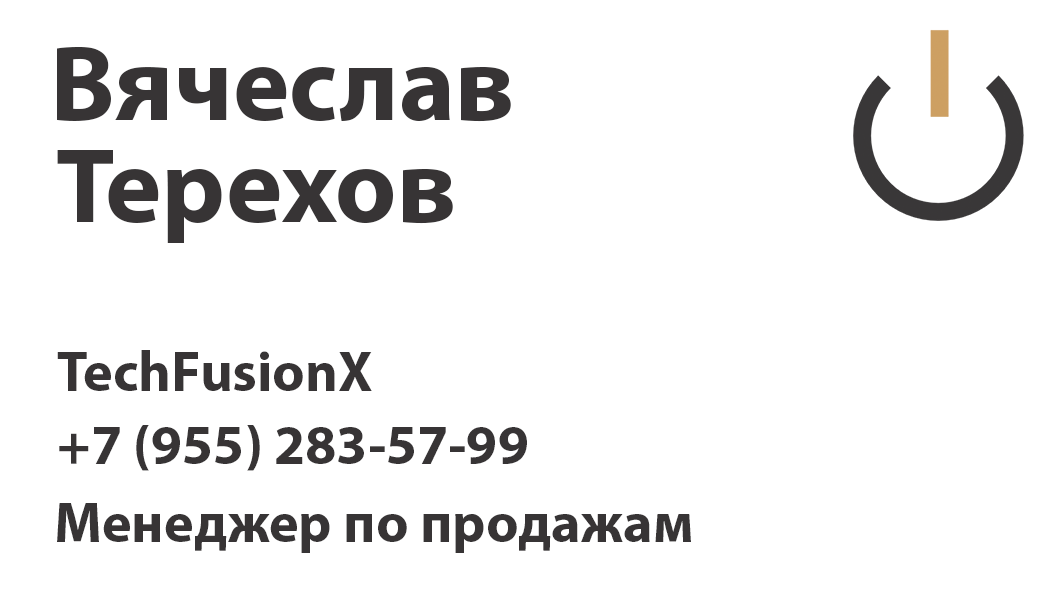
<style>
.page{position:relative;width:1063px;height:591px;background:#ffffff}
.page>*{position:absolute;margin:0}
.t1{font:107.4px "MyriadPro-Bold";color:#373435}
.t2{font:56.3px "MyriadPro-Bold";color:#373435}
</style>
<div class="page">
<p class="t1" style="left:57px;top:46px;width:454px;height:76px">Вячеслав</p>
<p class="t1" style="left:57px;top:150px;width:396px;height:93px">Терехов</p>
<p class="t2" style="left:57px;top:350px;width:315px;height:41px">TechFusionX</p>
<p class="t2" style="left:59px;top:425px;width:468px;height:46px">+7 (955) 283-57-99</p>
<p class="t2" style="left:57px;top:503px;width:634px;height:50px">Менеджер по продажам</p>
</div>
